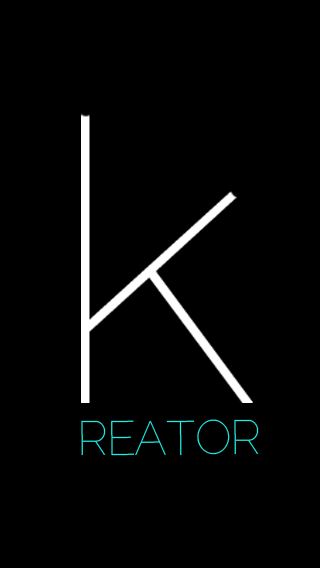
<style>
.page{position:relative;width:320px;height:568px;background:#010000}
.page>*{position:absolute;margin:0}
.t1{font:48px "Raleway-Thin";color:#1eeee7}
</style>
<div class="page">
<p class="t1" style="left:81px;top:419px;width:178px;height:37px">REATOR</p>
</div>
